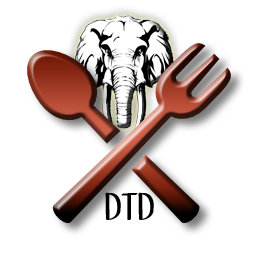
<style>
.page{position:relative;width:256px;height:256px;background:#ffffff}
.page>*{position:absolute;margin:0}
.t1{font:35px "CFJackStory-Regular";color:#000000}
</style>
<div class="page">
<p class="t1" style="left:105px;top:192px;width:49px;height:28px">DTD</p>
</div>
